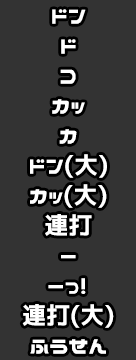
<style>
.page{position:relative;width:136px;height:360px;background:#333333}
.page>*{position:absolute;margin:0}
.t1{font:24px/30px "NicoKaku";color:#ffffff}
</style>
<div class="page">
<p class="t1" style="left:22px;top:9px;width:92px;height:345px;text-align:center">ドン<br>ド<br>コ<br>カッ<br>カ<br>ドン(大)<br>カッ(大)<br>連打<br>ー<br>ーっ!<br>連打(大)<br>ふうせん</p>
</div>
